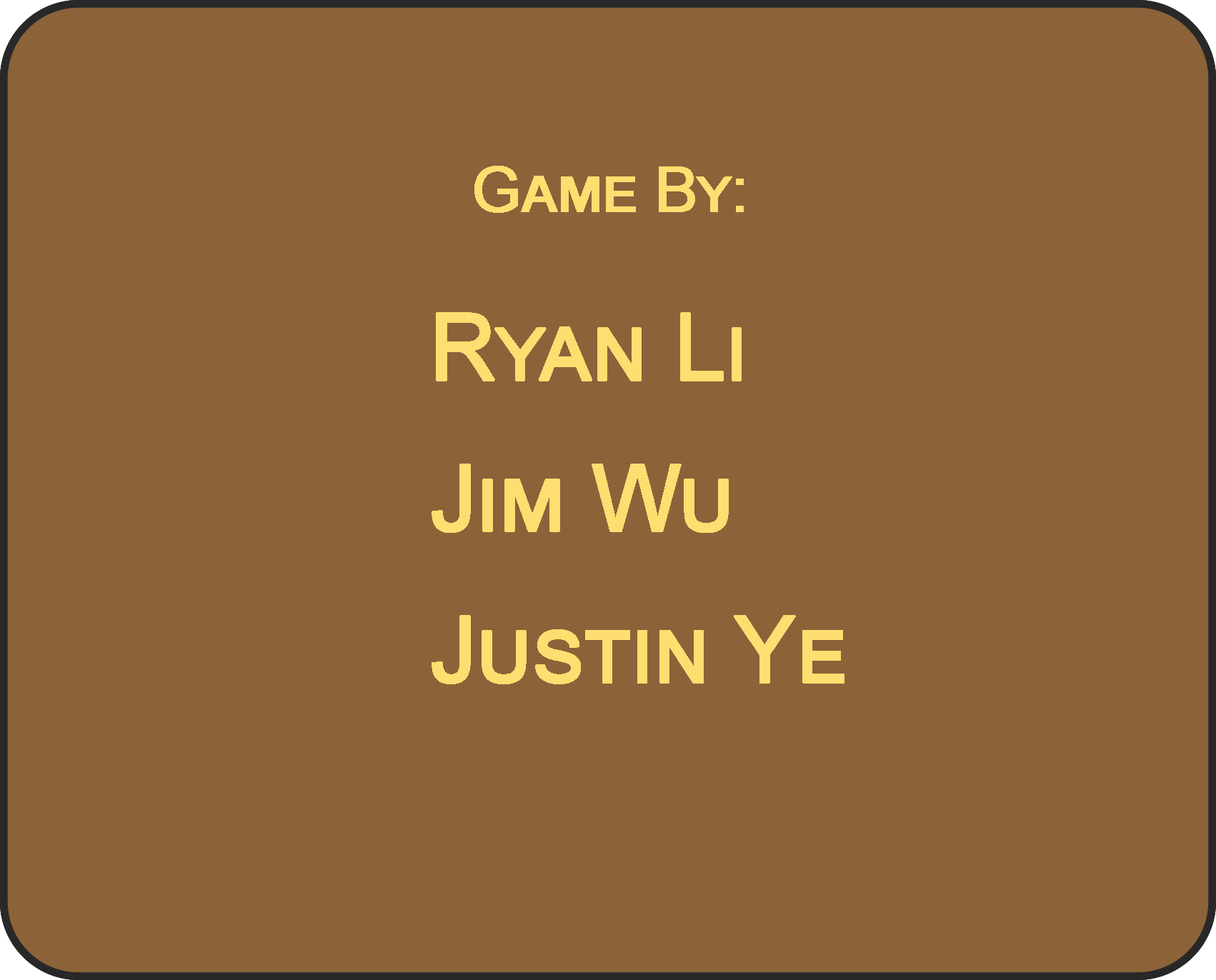
<style>
.page{position:relative;width:1216px;height:980px;background:#8c6239}
.page>*{position:absolute;margin:0}
.t1{font:62.8px "ArialMT";letter-spacing:-0.025em;color:#fede70;font-variant:small-caps;font-weight:bold}
.t2{font:92.4px/75.7px "ArialMT";letter-spacing:-0.025em;color:#fede70;font-variant:small-caps;font-weight:bold}
.t3{font:92.4px/18.9px "ArialMT";letter-spacing:-0.025em;color:#fede70;font-variant:small-caps;font-weight:bold}
</style>
<div class="page">
<p class="t1" style="left:474px;top:166px;width:270px;height:47px">Game By:</p>
<p class="t2" style="left:432px;top:312px;width:413px;height:373px"><span class="t3">Ryan Li</span><br><br>Jim Wu<br><br>Justin Ye</p>
</div>
